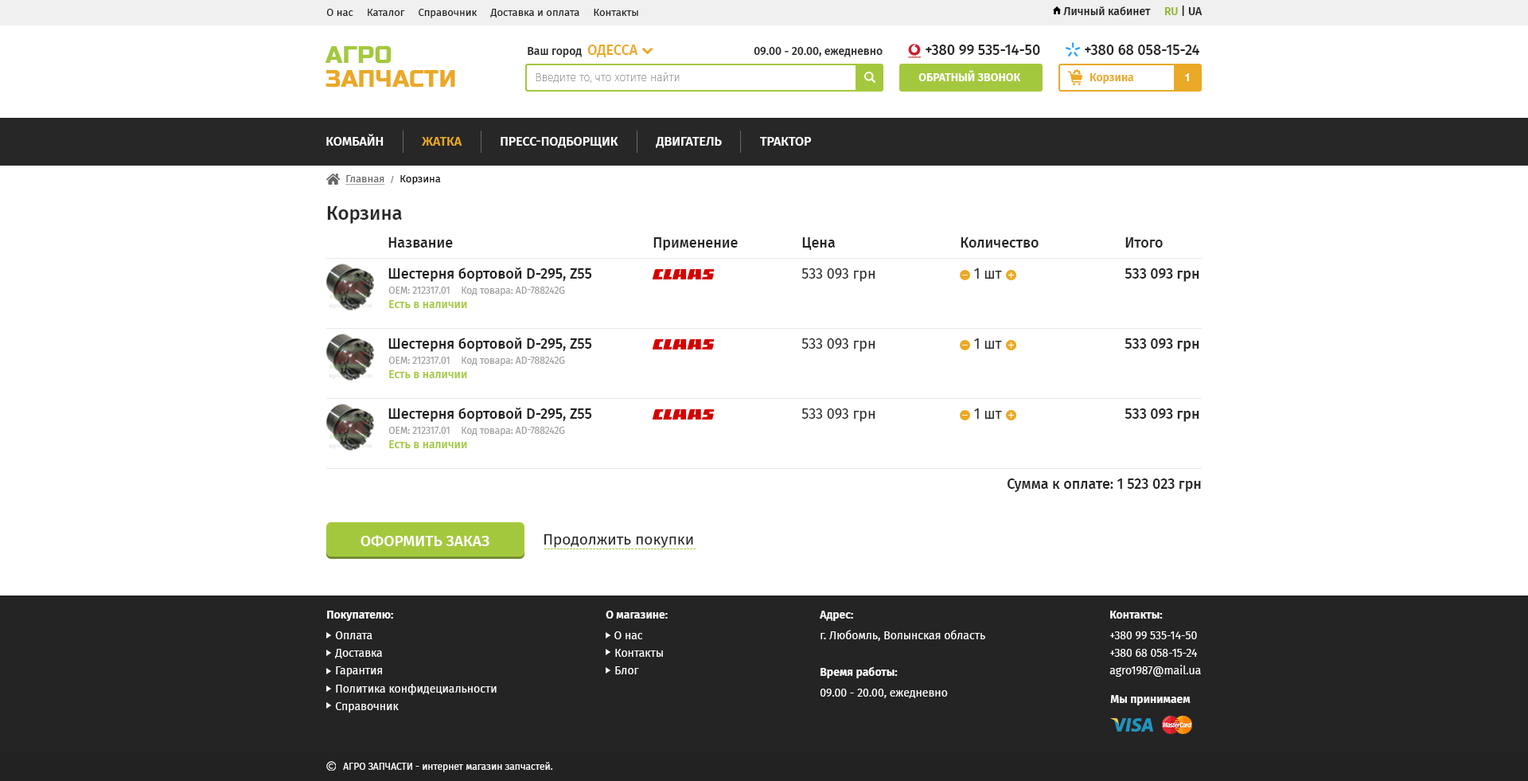
<style>
.page{position:relative;width:1528px;height:781px;background:#ffffff}
.page>*{position:absolute;margin:0}
.t1{font:11.1px "FiraSans-Medium";color:#212121}
.t2{font:11.1px "FiraSans-Medium";color:#91b627}
.t3{font:10.3px "FiraSans-Regular";color:#212121}
.t4{font:23.9px/23.9px "RussoOne-Regular";color:#eaa926;text-transform:uppercase}
.t5{font:23.9px/23.9px "RussoOne-Regular";color:#a4c83d;text-transform:uppercase}
.t6{font:11.1px "FiraSans-Medium";color:#272727}
.t7{font:14.3px "FiraSans-Medium";color:#eaa926}
.t8{font:14.3px "FiraSans-Medium";color:#272727}
.t9{font:11.1px "FiraSans-Thin";color:#777777}
.t10{font:11.1px "FiraSans-SemiBold";color:#ffffff;text-transform:uppercase}
.t11{font:11.1px "FiraSans-SemiBold";color:#eaa926}
.t12{font:11.1px "HelveticaNeueCyr-Bold";color:#ffffff}
.t13{font:12.7px "FiraSans-Medium";color:#ffffff;text-transform:uppercase}
.t14{font:12.7px "FiraSans-Medium";color:#eaa926;text-transform:uppercase}
.t15{font:10.3px "FiraSans-Regular";color:#676767;text-decoration:underline}
.t16{font:8px "FiraSans-Regular";color:#676767}
.t17{font:10.3px "FiraSans-Regular";color:#000000}
.t18{font:19.1px "FiraSans-Medium";color:#282828}
.t19{font:14.3px "FiraSans-Medium";color:#212121}
.t20{font:14.3px "FiraSans-Regular";color:#272727}
.t21{font:14.3px "FiraSans-Regular";color:#212121}
.t22{font:9.5px "FiraSans-Regular";color:#9e9e9e;text-transform:uppercase}
.t23{font:9.5px "FiraSans-Regular";color:#9e9e9e}
.t24{font:11.1px "FiraSans-Medium";color:#a4c83d}
.t25{font:15.1px "FiraSans-Regular";color:#272727}
.t26{font:15.1px "FiraSans-Medium";color:#fffefe;text-transform:uppercase}
.t27{font:11.1px/17.5px "FiraSans-Regular";color:#ffffff}
.t28{font:11.1px/20.7px "FiraSans-SemiBold";color:#ffffff}
.t29{font:11.1px/20.7px "FiraSans-Regular";color:#ffffff}
.t30{font:11.1px "FiraSans-SemiBold";color:#ffffff}
.t31{font:9.5px "FiraSans-Regular";color:#ffffff}
</style>
<div class="page">
<p class="t1" style="left:1063px;top:6px;width:139px;height:10px">Личный кабинет     <span class="t2">RU</span> | UA</p>
<p class="t3" style="left:326px;top:9px;width:312px;height:9px">О нас     Каталог     Справочник     Доставка и оплата     Контакты</p>
<p class="t4" style="left:325px;top:45px;width:130px;height:43px"><span class="t5">АГРО<br></span>ЗАПЧАСТИ</p>
<p class="t6" style="left:528px;top:45px;width:110px;height:12px">Ваш город  <span class="t7">ОДЕССА</span></p>
<p class="t6" style="left:753px;top:47px;width:129px;height:10px">09.00 - 20.00, ежедневно</p>
<p class="t8" style="left:925px;top:45px;width:115px;height:10px">+380 99 535-14-50</p>
<p class="t8" style="left:1084px;top:45px;width:115px;height:10px">+380 68 058-15-24</p>
<p class="t9" style="left:535px;top:72px;width:145px;height:11px">Введите то, что хотите найти</p>
<p class="t10" style="left:918px;top:70px;width:103px;height:11px">Обратный звонок</p>
<p class="t11" style="left:1089px;top:73px;width:45px;height:11px">Корзина</p>
<p class="t12" style="left:1185px;top:73px;width:4px;height:9px">1</p>
<p class="t13" style="left:326px;top:134px;width:486px;height:14px">КОМБАЙН            <span class="t14">ЖАТКА            </span>ПРЕСС-ПОДБОРЩИК            ДВИГАТЕЛЬ            трактор</p>
<p class="t15" style="left:345px;top:175px;width:96px;height:10px">Главная  <span class="t16">/</span><span class="t17">  Корзина</span></p>
<p class="t18" style="left:327px;top:206px;width:75px;height:18px">Корзина</p>
<p class="t8" style="left:388px;top:237px;width:65px;height:10px">Название</p>
<p class="t8" style="left:653px;top:237px;width:85px;height:14px">Применение</p>
<p class="t8" style="left:802px;top:237px;width:33px;height:13px">Цена</p>
<p class="t8" style="left:960px;top:237px;width:78px;height:10px">Количество</p>
<p class="t8" style="left:1125px;top:237px;width:37px;height:10px">Итого</p>
<p class="t19" style="left:388px;top:267px;width:204px;height:15px">Шестерня бортовой D-295, Z55</p>
<p class="t20" style="left:801px;top:268px;width:74px;height:14px">533 093 грн</p>
<p class="t20" style="left:974px;top:268px;width:28px;height:10px"><span class="t21"><br><br>                 </span>  1 шт</p>
<p class="t8" style="left:1124px;top:268px;width:75px;height:14px">533 093 грн</p>
<p class="t22" style="left:388px;top:286px;width:62px;height:8px">Оем: 212317.01</p>
<p class="t23" style="left:461px;top:286px;width:104px;height:10px">Код товара: <span class="t22">AD-</span>788242G</p>
<p class="t24" style="left:389px;top:300px;width:78px;height:8px">Есть в наличии</p>
<p class="t19" style="left:388px;top:337px;width:204px;height:15px">Шестерня бортовой D-295, Z55</p>
<p class="t20" style="left:801px;top:338px;width:74px;height:14px">533 093 грн</p>
<p class="t20" style="left:974px;top:338px;width:28px;height:11px"><span class="t21"><br><br>                 </span>  1 шт</p>
<p class="t8" style="left:1124px;top:338px;width:75px;height:14px">533 093 грн</p>
<p class="t22" style="left:388px;top:356px;width:62px;height:8px">Оем: 212317.01</p>
<p class="t23" style="left:461px;top:356px;width:104px;height:10px">Код товара: <span class="t22">AD-</span>788242G</p>
<p class="t24" style="left:389px;top:370px;width:78px;height:8px">Есть в наличии</p>
<p class="t19" style="left:388px;top:407px;width:204px;height:15px">Шестерня бортовой D-295, Z55</p>
<p class="t20" style="left:801px;top:408px;width:74px;height:14px">533 093 грн</p>
<p class="t20" style="left:974px;top:408px;width:28px;height:11px"><span class="t21"><br><br>                 </span>  1 шт</p>
<p class="t8" style="left:1124px;top:408px;width:75px;height:14px">533 093 грн</p>
<p class="t22" style="left:388px;top:426px;width:62px;height:8px">Оем: 212317.01</p>
<p class="t23" style="left:461px;top:426px;width:104px;height:10px">Код товара: <span class="t22">AD-</span>788242G</p>
<p class="t24" style="left:389px;top:440px;width:78px;height:8px">Есть в наличии</p>
<p class="t8" style="left:1007px;top:478px;width:194px;height:14px">Сумма к оплате: 1 523 023 грн</p>
<p class="t25" style="left:544px;top:534px;width:149px;height:13px">Продолжить покупки</p>
<p class="t26" style="left:360px;top:535px;width:129px;height:12px">оформить заказ</p>
<p class="t27" style="left:327px;top:610px;width:169px;height:102px"><span class="t28">Покупателю:<br></span><span class="t29">   Оплата<br></span>   Доставка<br>   Гарантия<br>   Политика конфидециальности<br>   Справочник</p>
<p class="t27" style="left:606px;top:610px;width:62px;height:64px"><span class="t28">О магазине:<br>   </span><span class="t29">О нас<br></span>   Контакты<br>   Блог</p>
<p class="t29" style="left:820px;top:610px;width:165px;height:31px"><span class="t28">Адрес:<br></span>г. Любомль, Волынская область</p>
<p class="t27" style="left:1109px;top:610px;width:92px;height:66px"><span class="t28">Контакты:<br></span><span class="t29">+380 99 535-14-50<br></span>+380 68 058-15-24<br>agro1987@mail.ua</p>
<p class="t29" style="left:820px;top:666px;width:128px;height:32px"><span class="t28">Время работы:<br></span>09.00 - 20.00, ежедневно</p>
<p class="t30" style="left:1110px;top:695px;width:80px;height:10px">Мы принимаем</p>
<p class="t31" style="left:343px;top:761px;width:210px;height:11px">АГРО ЗАПЧАСТИ - интернет магазин запчастей.</p>
</div>
